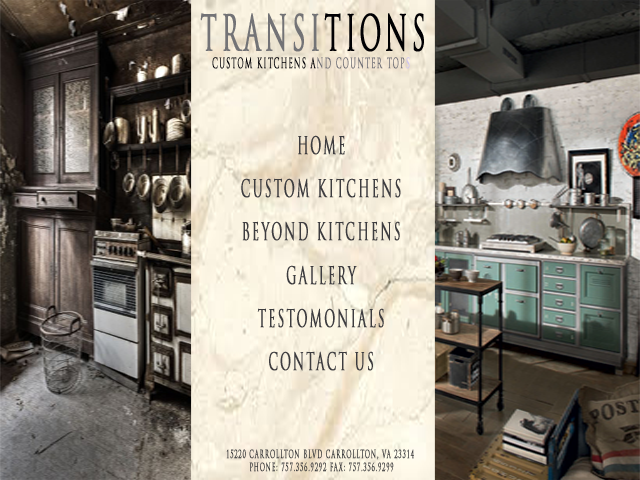
<style>
.page{position:relative;width:640px;height:480px}
.page>*{position:absolute;margin:0}
.t1{font:48px "TrajanPro-Regular";letter-spacing:0.15em;color:#737376;text-transform:uppercase;font-weight:bold;scale:0.5 1}
.t2{font:48px "TrajanPro-Regular";letter-spacing:0.15em;color:#010003;text-transform:uppercase;font-weight:bold;scale:0.5 1}
.t3{font:14px "TrajanPro-Regular";letter-spacing:0.15em;color:#010005;text-transform:uppercase;font-weight:bold;scale:0.5 1}
.t4{font:14px "TrajanPro-Regular";letter-spacing:0.15em;color:#6b6b73;text-transform:uppercase;font-weight:bold;scale:0.5 1}
.t5{font:14px "TrajanPro-Regular";letter-spacing:0.15em;color:#ccc3f2;text-transform:uppercase;font-weight:bold;scale:0.5 1}
.t6{font:24px "TrajanPro-Regular";letter-spacing:0.15em;color:#3d3c3f;text-transform:uppercase;font-weight:bold;scale:0.5 1}
.t7{font:11px "TrajanPro-Regular";letter-spacing:0.15em;color:#363638;text-transform:uppercase;font-weight:bold;scale:0.5 1}
</style>
<div class="page">
<p class="t1" style="left:200px;top:13px;width:224px;height:39px">Transi<span class="t2">tions</span></p>
<p class="t3" style="left:212px;top:57px;width:198px;height:12px">Custom Kitchens a<span class="t4">nd Counter Top</span><span class="t5">s</span></p>
<p class="t6" style="left:241px;top:135px;width:160px;height:236px;text-align:center">HOme<br><br>Custom Kitchens<br><br>Beyond Kitchens<br><br>Gallery<br><br>Testomonials<br><br>Contact Us</p>
<p class="t7" style="left:226px;top:449px;width:188px;height:23px;text-align:center">15220 Carrollton Blvd Carrollton, VA 23314<br> Phone: 757.356.9292 Fax: 757.356.9299</p>
</div>
